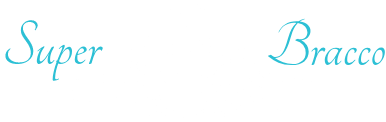
<style>
.page{position:relative;width:386px;height:122px;background:#ffffff}
.page>*{position:absolute;margin:0}
.t1{font:68px "Tangerine-Regular";color:#2cc0d5}
</style>
<div class="page">
<p class="t1" style="left:5px;top:20px;width:98px;height:61px">Super</p>
<p class="t1" style="left:267px;top:18px;width:118px;height:48px">Bracco</p>
</div>
